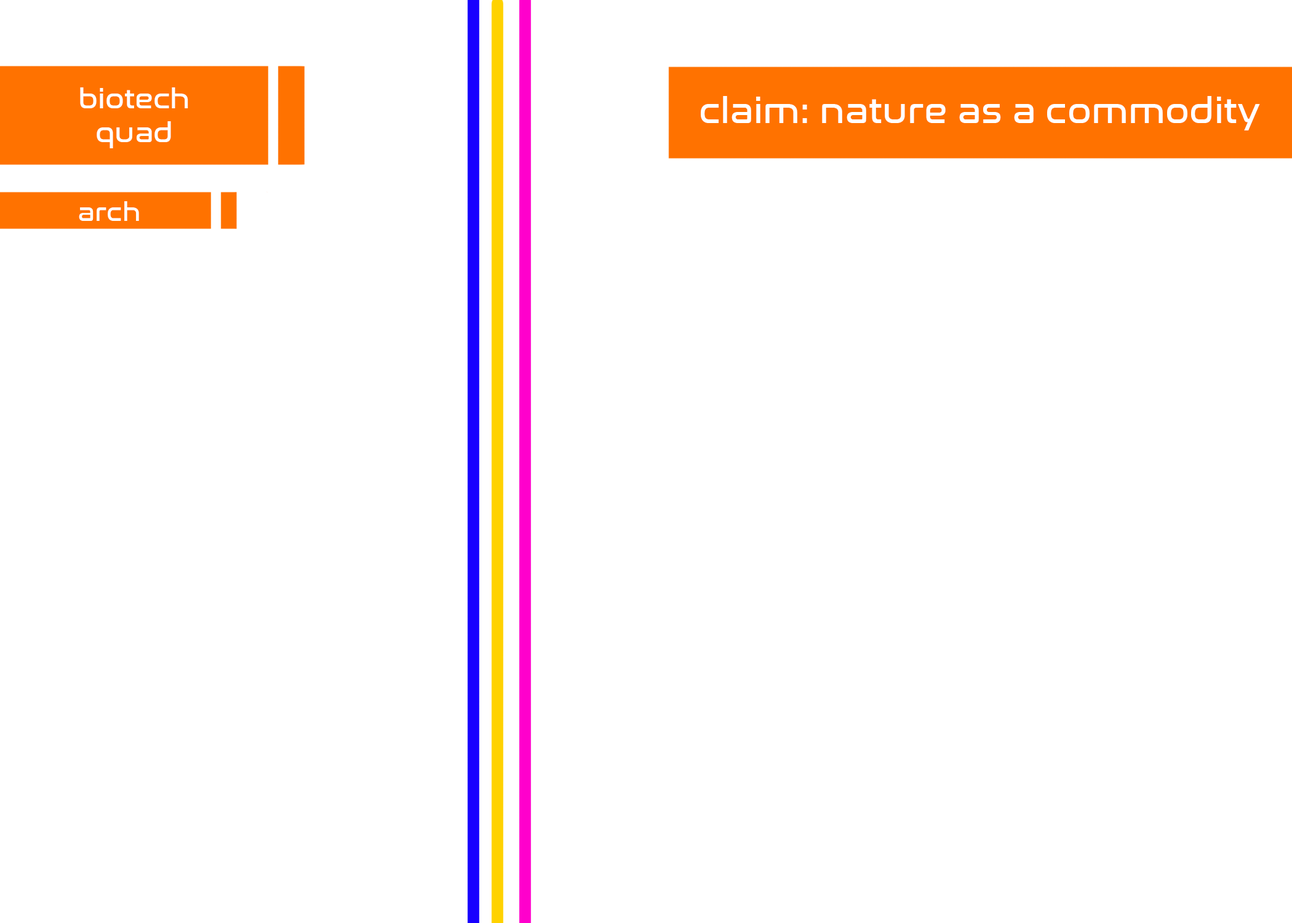
<style>
.page{position:relative;width:1292px;height:923px;background:#ffffff}
.page>*{position:absolute;margin:0}
.t1{font:28.2px "NasalizationRg-Regular";color:#ffffff}
.t2{font:35.9px "NasalizationRg-Regular";color:#ffffff}
.t3{font:25.6px "NasalizationRg-Regular";color:#ffffff}
</style>
<div class="page">
<p class="t1" style="left:80px;top:87px;width:108px;height:61px;text-align:center">biotech quad</p>
<p class="t2" style="left:701px;top:96px;width:559px;height:34px">claim: nature as a commodity</p>
<p class="t3" style="left:79px;top:201px;width:60px;height:20px">arch</p>
</div>
